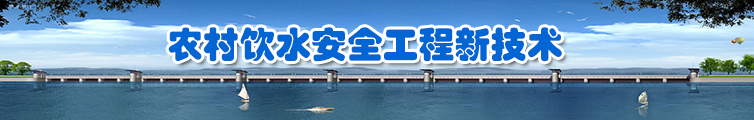
<style>
.page{position:relative;width:754px;height:120px}
.page>*{position:absolute;margin:0}
.t1{font:36px "STHupo";color:#0265d4}
</style>
<div class="page">
<p class="t1" style="left:168px;top:27px;width:394px;height:35px">农村饮水安全工程新技术</p>
</div>
